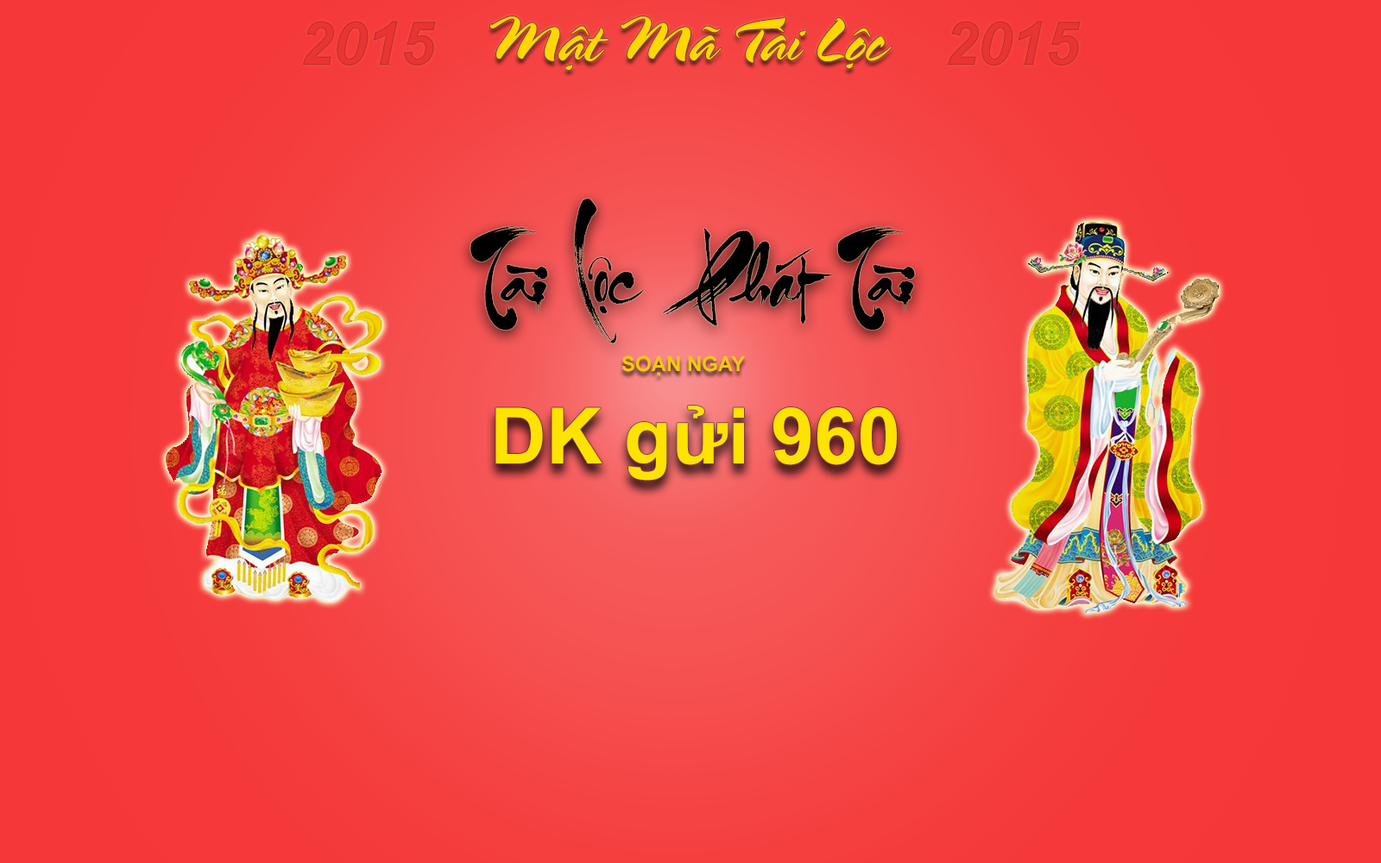
<style>
.page{position:relative;width:1381px;height:863px}
.page>*{position:absolute;margin:0}
.t1{font:62.2px "UTM-Spring";color:#fed700}
.t2{font:60.4px "Arial-BoldItalicMT";color:#e93434}
.t3{font:69.1px "UTM-ThuPhap-Thien-An";color:#000000}
.t4{font:20.7px "Arial-BoldMT";color:#f4c908}
.t5{font:77.7px "Arial-BoldMT";color:#fee300}
</style>
<div class="page">
<p class="t1" style="left:489px;top:16px;width:403px;height:54px">Mật Mã Tài Lộc</p>
<p class="t2" style="left:303px;top:21px;width:133px;height:45px">2015</p>
<p class="t2" style="left:948px;top:21px;width:133px;height:45px">2015</p>
<p class="t3" style="left:470px;top:199px;width:445px;height:145px">Tài Lộc Phát Tài</p>
<p class="t4" style="left:622px;top:356px;width:123px;height:20px">SOẠN NGAY</p>
<p class="t5" style="left:496px;top:406px;width:401px;height:75px">DK gửi 960</p>
</div>
